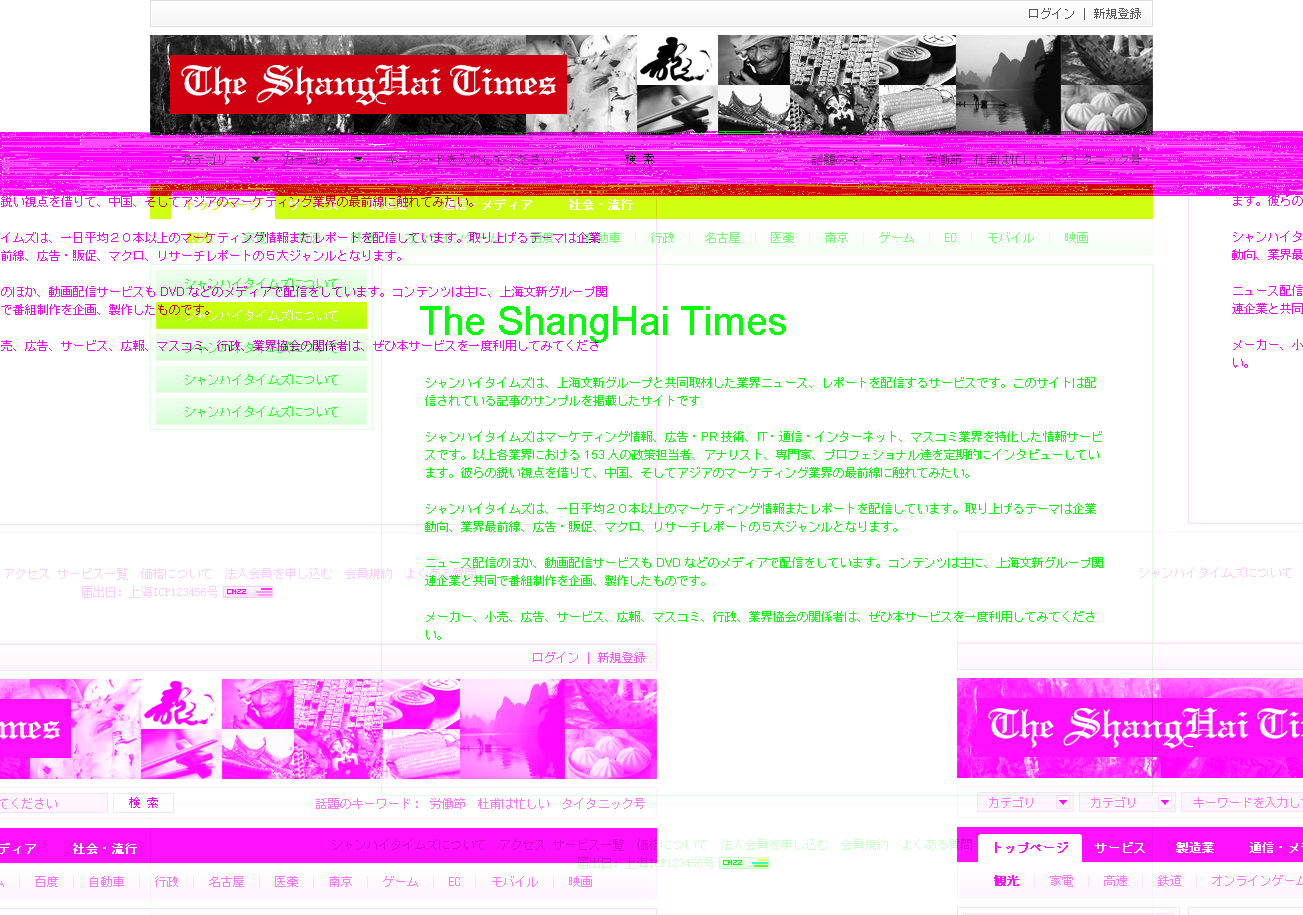
<style>
.page{position:relative;width:1303px;height:915px;background:#ffffff}
.page>*{position:absolute;margin:0}
.t1{font:12px "MS-Gothic";color:#555555}
.t2{font:44.5px "OldEnglish";color:#ffffff}
.t3{font:12px "MS-Gothic"}
.t4{font:12px "MS-Mincho";color:#000000}
.t5{font:12px "MS-Gothic";color:#d0ff10;font-weight:bold}
.t6{font:12px "MS-Gothic";color:#ffffff;font-weight:bold}
.t7{font:12px "MS-Gothic";color:#77ff77}
.t8{font:12px "MS-Gothic";color:#77ff77;font-weight:bold}
.t9{font:12px "MS-Gothic";color:#33ff33;text-transform:uppercase}
.t10{font:12px "MS-Gothic";color:#ffffff;text-transform:uppercase}
.t11{font:40px "ArialMT";color:#00ff00}
.t12{font:12px/18px "MS-Gothic";color:#01ff01}
.t13{font:12px/18px "ArialMT";color:#01ff01}
.t14{font:12px/18px "MS-Gothic";text-transform:uppercase}
.t15{font:12px/18px "SimSun";text-transform:uppercase}
</style>
<div class="page">
<p class="t1" style="left:1029px;top:8px;width:112px;height:12px">ログイン | 新規登録</p>
<p class="t2" style="left:181px;top:64px;width:375px;height:42px">The ShangHai Times</p>
<p class="t3" style="left:182px;top:154px;width:44px;height:11px">カテゴリ</p>
<p class="t3" style="left:284px;top:154px;width:44px;height:11px">カテゴリ</p>
<p class="t3" style="left:386px;top:154px;width:167px;height:11px">キーワードを入力してください</p>
<p class="t4" style="left:625px;top:153px;width:29px;height:11px">検 索</p>
<p class="t3" style="left:812px;top:154px;width:329px;height:11px">話題のキーワード： 労働節  杜甫は忙しい  タイタニック号</p>
<p class="t5" style="left:188px;top:199px;width:73px;height:11px">トップページ</p>
<p class="t6" style="left:288px;top:199px;width:50px;height:11px">サービス</p>
<p class="t6" style="left:369px;top:199px;width:38px;height:11px">製造業</p>
<p class="t6" style="left:442px;top:199px;width:90px;height:11px">通信・メディア</p>
<p class="t6" style="left:569px;top:199px;width:64px;height:11px">社会・流行</p>
<p class="t7" style="left:187px;top:232px;width:901px;height:12px"><span class="t8">観光</span>  |  家電  |  高速  |  鉄道  |  オンラインゲーム  |  百度  |  自動車  |  行政  |  名古屋  |  医薬  |  南京  |  ゲーム  |  EC  |  モバイル  |  映画</p>
<p class="t9" style="left:185px;top:278px;width:153px;height:11px">シャンハイタイムズについて</p>
<p class="t10" style="left:185px;top:310px;width:153px;height:11px">シャンハイタイムズについて</p>
<p class="t11" style="left:420px;top:306px;width:366px;height:37px">The ShangHai Times</p>
<p class="t9" style="left:185px;top:342px;width:153px;height:11px">シャンハイタイムズについて</p>
<p class="t9" style="left:185px;top:374px;width:153px;height:11px">シャンハイタイムズについて</p>
<p class="t12" style="left:425px;top:377px;width:678px;height:263px">シャンハイタイムズは、上海文新グループと共同取材した業界ニュース、レポートを配信するサービスです。このサイトは配信されている記事のサンプルを掲載したサイトです<br><br>シャンハイタイムズはマーケティング情報、広告・<span class="t13">PR</span>技術、<span class="t13">IT</span>・通信・インターネット、マスコミ業界を特化した情報サービスです。以上各業界における<span class="t13">153</span>人の政策担当者、アナリスト、専門家、プロフェショナル達を定期的にインタビューしています。彼らの鋭い視点を借りて、中国、そしてアジアのマーケティング業界の最前線に触れてみたい。<br><br>シャンハイタイムズは、一日平均２０本以上のマーケティング情報またレポートを配信しています。取り上げるテーマは企業動向、業界最前線、広告・販促、マクロ、リサーチレポートの５大ジャンルとなります。<br><br>ニュース配信のほか、動画配信サービスも<span class="t13">DVD</span>などのメディアで配信をしています。コンテンツは主に、上海文新グループ関連企業と共同で番組制作を企画、製作したものです。<br><br>メーカー、小売、広告、サービス、広報、マスコミ、行政、業界協会の関係者は、ぜひ本サービスを一度利用してみてください。</p>
<p class="t9" style="left:185px;top:406px;width:153px;height:11px">シャンハイタイムズについて</p>
<p class="t14" style="left:332px;top:839px;width:640px;height:30px;text-align:center">シャンハイタイムズについて  アクセス サービス一覧  価格について  法人会員を申し込む  会員規約  よくある質問<br><span class="t15">届出日：上海ICP123456号</span></p>
</div>
